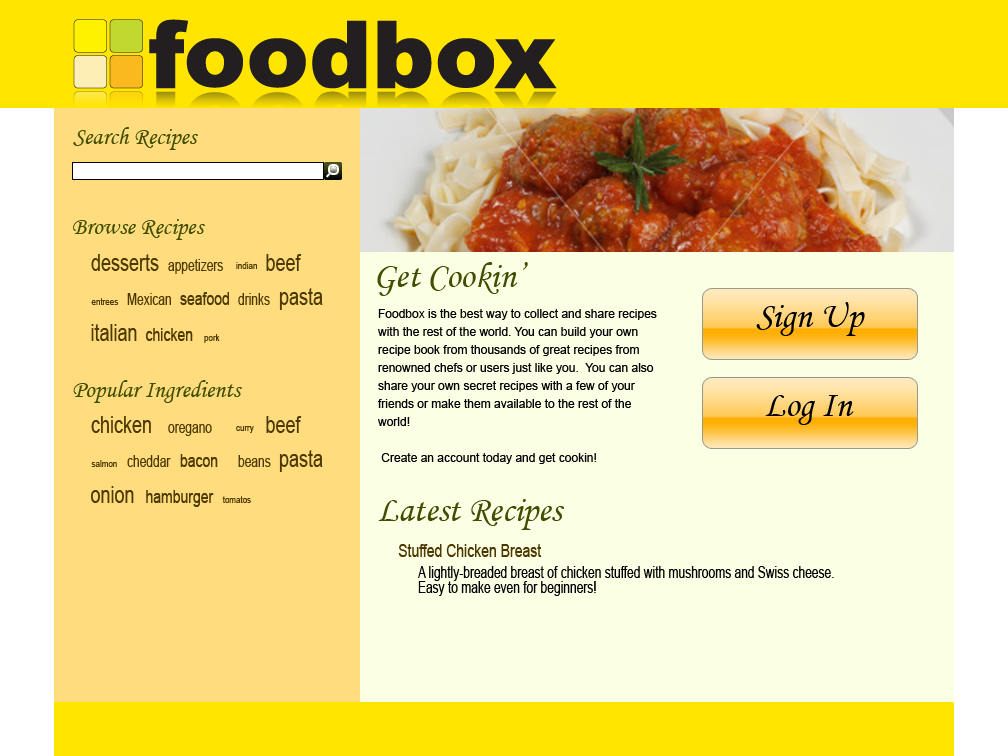
<style>
.page{position:relative;width:1008px;height:756px;background:#fbffe4}
.page>*{position:absolute;margin:0}
.t1{font:24px "MonotypeCorsiva";color:#414d00}
.t2{font:23.4px "ArialMT";color:#4d3900;scale:0.77 1}
.t3{font:15.6px "ArialMT";color:#4d3900;scale:0.77 1}
.t4{font:10.4px "ArialMT";color:#4d3900;scale:0.77 1}
.t5{font:36px "MonotypeCorsiva";color:#414d00}
.t6{font:18.2px "ArialMT";color:#4d3900;scale:0.77 1}
.t7{font:12px/18px "ArialMT";color:#000000}
.t8{font:15.6px "ArialMT";color:#000000;scale:0.77 1}
</style>
<div class="page">
<p class="t1" style="left:73px;top:127px;width:125px;height:23px">Search Recipes</p>
<p class="t1" style="left:73px;top:219px;width:132px;height:21px">Browse Recipes</p>
<p class="t2" style="left:91px;top:254px;width:68px;height:17px">desserts</p>
<p class="t2" style="left:266px;top:254px;width:36px;height:17px">beef</p>
<p class="t3" style="left:168px;top:259px;width:55px;height:15px">appetizers</p>
<p class="t4" style="left:236px;top:262px;width:21px;height:7px">indian</p>
<p class="t5" style="left:377px;top:262px;width:151px;height:34px">Get Cookin’</p>
<p class="t3" style="left:127px;top:293px;width:44px;height:12px">Mexican</p>
<p class="t6" style="left:180px;top:292px;width:49px;height:13px">seafood</p>
<p class="t3" style="left:238px;top:293px;width:32px;height:12px">drinks</p>
<p class="t2" style="left:279px;top:288px;width:44px;height:22px">pasta</p>
<p class="t4" style="left:91px;top:298px;width:28px;height:7px">entrees</p>
<p class="t7" style="left:378px;top:309px;width:279px;height:155px">Foodbox is the best way to collect and share recipes with the rest of the world. You can build your own recipe book from thousands of great recipes from renowned chefs or users just like you.  You can also share your own secret recipes with a few of your friends or make them available to the rest of the world!<br><br> Create an account today and get cookin!</p>
<p class="t2" style="left:91px;top:324px;width:46px;height:17px">italian</p>
<p class="t6" style="left:146px;top:328px;width:47px;height:13px">chicken</p>
<p class="t4" style="left:204px;top:334px;width:16px;height:9px">pork</p>
<p class="t1" style="left:73px;top:380px;width:169px;height:23px">Popular Ingredients</p>
<p class="t2" style="left:91px;top:416px;width:60px;height:17px">chicken</p>
<p class="t3" style="left:168px;top:424px;width:44px;height:12px">oregano</p>
<p class="t2" style="left:266px;top:416px;width:36px;height:17px">beef</p>
<p class="t4" style="left:236px;top:426px;width:18px;height:7px">curry</p>
<p class="t4" style="left:91px;top:460px;width:26px;height:7px">salmon</p>
<p class="t3" style="left:127px;top:455px;width:44px;height:12px">cheddar</p>
<p class="t6" style="left:180px;top:454px;width:38px;height:13px">bacon</p>
<p class="t3" style="left:238px;top:455px;width:33px;height:12px">beans</p>
<p class="t2" style="left:279px;top:450px;width:44px;height:22px">pasta</p>
<p class="t2" style="left:91px;top:486px;width:43px;height:17px">onion</p>
<p class="t6" style="left:146px;top:490px;width:68px;height:17px">hamburger</p>
<p class="t4" style="left:222px;top:496px;width:29px;height:7px">tomatos</p>
<p class="t5" style="left:378px;top:499px;width:186px;height:31px">Latest Recipes</p>
<p class="t6" style="left:398px;top:544px;width:144px;height:13px">Stuffed Chicken Breast</p>
<p class="t8" style="left:418px;top:566px;width:416px;height:30px">A lightly-breaded breast of chicken stuffed with mushrooms and Swiss cheese.<br>Easy to make even for beginners!</p>
</div>
